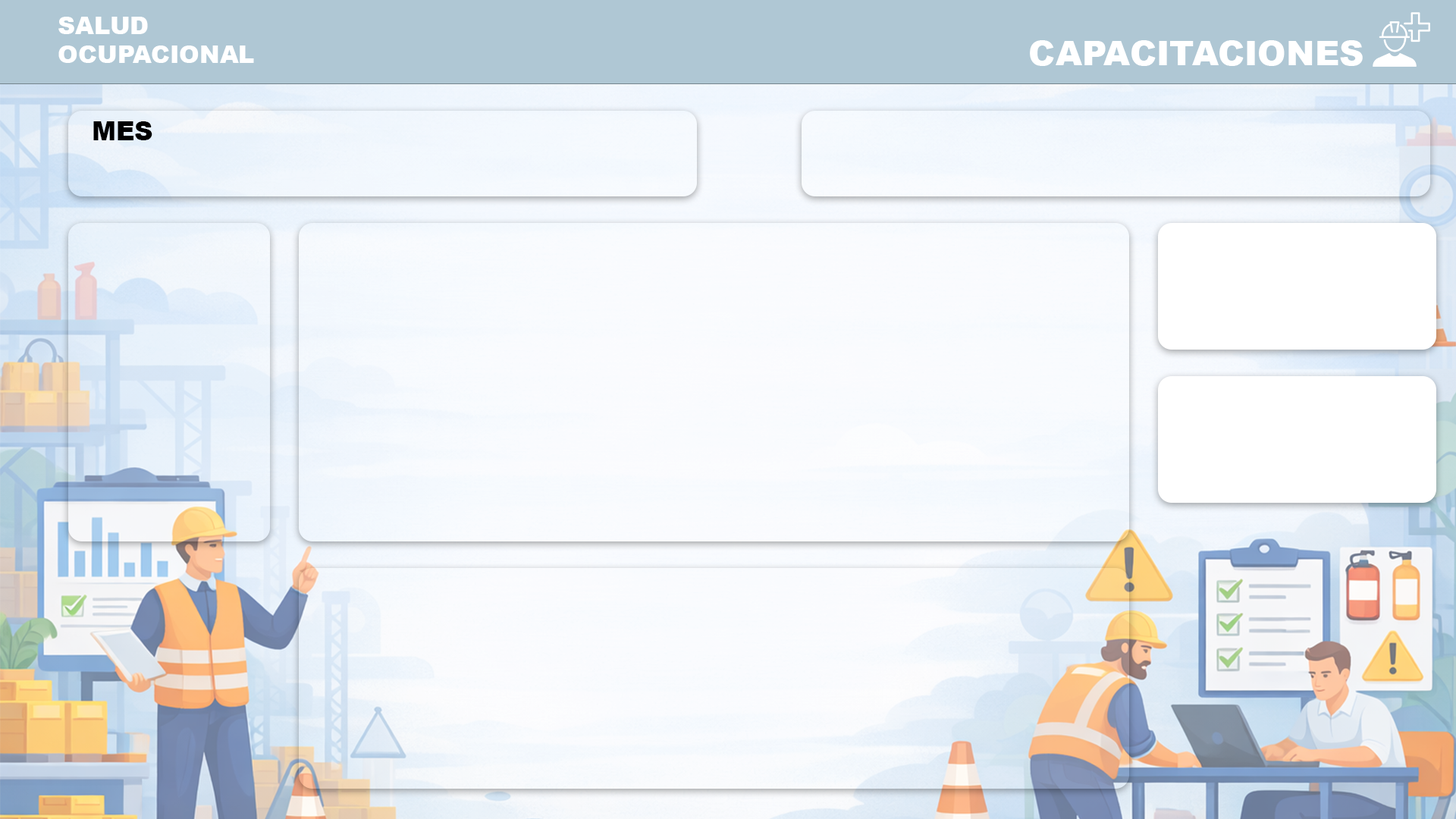
<style>
.page{position:relative;width:1456px;height:819px}
.page>*{position:absolute;margin:0}
.t1{font:24.4px "Arial-Black";letter-spacing:-0.005em;color:#ffffff}
.t2{font:34.4px "Arial-Black";letter-spacing:-0.005em;color:#ffffff}
.t3{font:25.6px "Arial-Black";letter-spacing:-0.005em;color:#000000}
</style>
<div class="page">
<p class="t1" style="left:58px;top:17px;width:196px;height:46px">SALUD<br>OCUPACIONAL</p>
<p class="t2" style="left:1030px;top:40px;width:333px;height:26px">CAPACITACIONES</p>
<p class="t3" style="left:93px;top:121px;width:59px;height:19px">MES</p>
</div>
